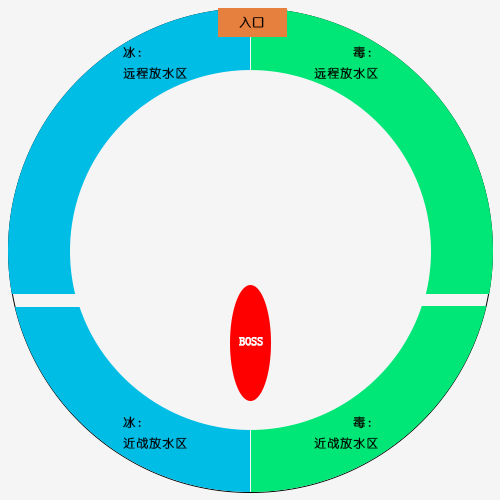
<style>
.page{position:relative;width:500px;height:500px;background:#f5f5f5}
.page>*{position:absolute;margin:0}
.t1{font:12px "YouYuan";color:#000000;font-weight:bold}
.t2{font:12px "YouYuan";color:#ffffff;font-weight:bold}
</style>
<div class="page">
<p class="t1" style="left:239px;top:16px;width:25px;height:12px">入口</p>
<p class="t1" style="left:123px;top:46px;width:64px;height:34px">冰：<br>远程放水区</p>
<p class="t1" style="left:314px;top:46px;width:64px;height:34px;text-align:right">毒：<br>远程放水区</p>
<p class="t2" style="left:239px;top:337px;width:24px;height:9px">BOSS</p>
<p class="t1" style="left:123px;top:416px;width:64px;height:33px">冰：<br>近战放水区</p>
<p class="t1" style="left:314px;top:416px;width:64px;height:33px;text-align:right">毒：<br>近战放水区</p>
</div>
